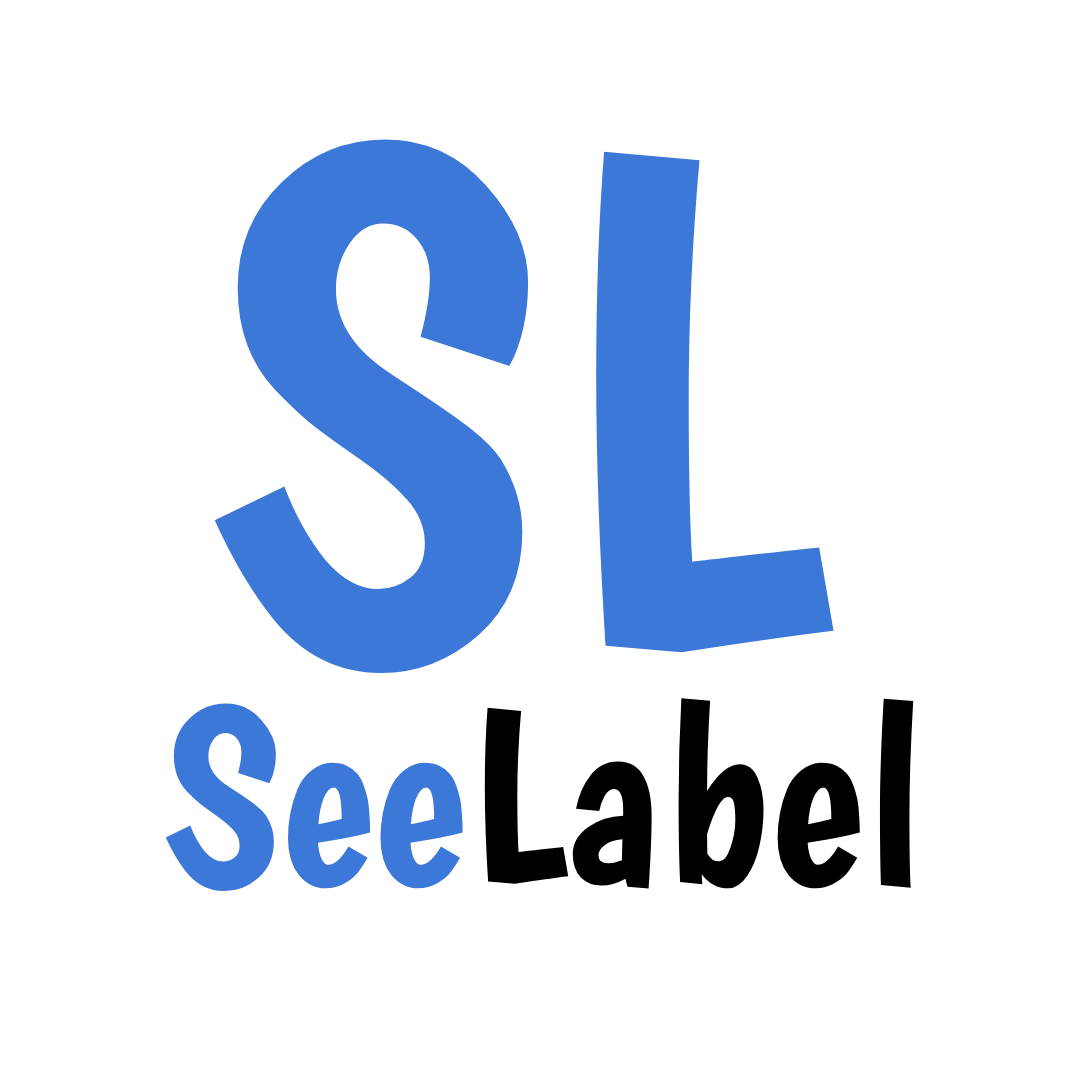
<style>
.page{position:relative;width:1080px;height:1080px;background:#ffffff}
.page>*{position:absolute;margin:0}
.t1{font:717px "Boogaloo-Regular";color:#3c78d8}
.t2{font:252px "Boogaloo-Regular";color:#000000}
.t3{font:252px "Boogaloo-Regular";color:#3c78d8}
</style>
<div class="page">
<p class="t1" style="left:214px;top:139px;width:620px;height:534px">SL</p>
<p class="t2" style="left:165px;top:698px;width:749px;height:194px"><span class="t3">See</span>Label</p>
</div>
